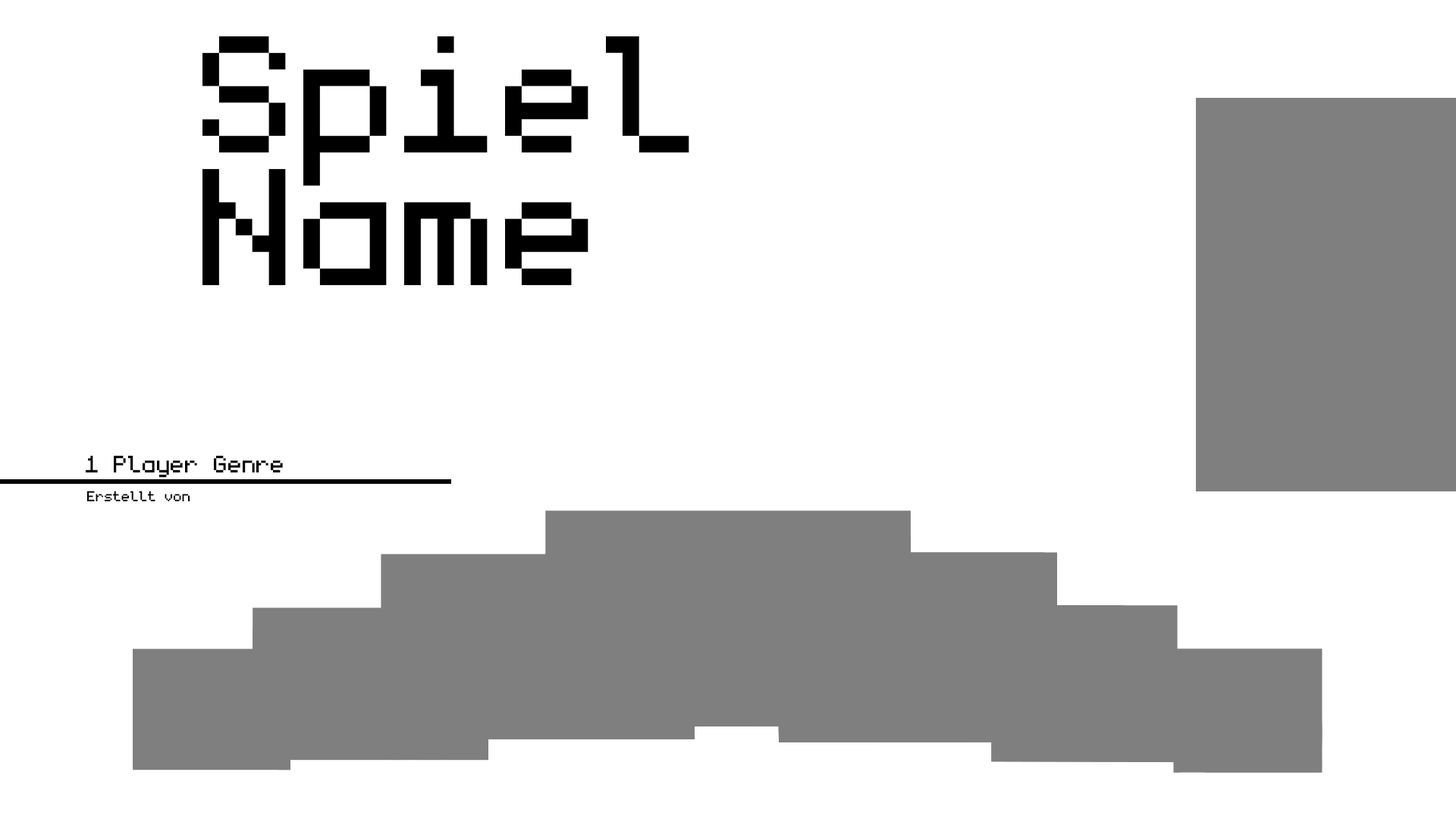
<style>
.page{position:relative;width:1456px;height:819px;background:#ffffff}
.page>*{position:absolute;margin:0}
.t1{font:265.4px/132.7px "monogram";letter-spacing:0.005em;color:#000000}
.t2{font:37.9px "monogram";color:#000000}
.t3{font:37.9px "monogram"}
.t4{font:22.7px "monogram";letter-spacing:0.005em;color:#000000}
.t5{font:22.7px "monogram";letter-spacing:0.005em}
</style>
<div class="page">
<p class="t1" style="left:202px;top:36px;width:487px;height:249px">Spiel<br>Name</p>
<p class="t2" style="left:86px;top:456px;width:111px;height:22px">1 Player</p>
<p class="t3" style="left:87px;top:457px;width:112px;height:22px">1 Player</p>
<p class="t2" style="left:214px;top:456px;width:69px;height:16px">Genre</p>
<p class="t4" style="left:86px;top:491px;width:104px;height:11px">Erstellt von</p>
<p class="t5" style="left:87px;top:491px;width:104px;height:12px">Erstellt von</p>
</div>
